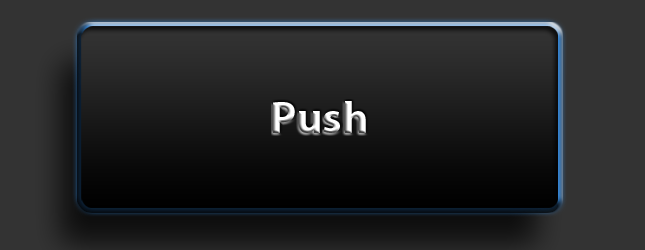
<style>
.page{position:relative;width:645px;height:250px;background:#333333}
.page>*{position:absolute;margin:0}
.t1{font:45px "MyriadPro-Bold"}
</style>
<div class="page">
<p class="t1" style="left:273px;top:101px;width:93px;height:32px">Push</p>
</div>
